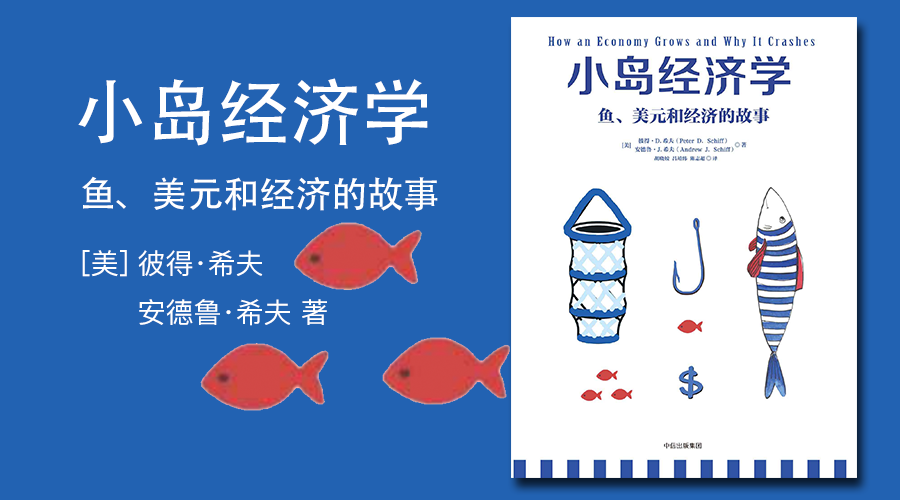
<style>
.page{position:relative;width:900px;height:500px;background:#2262b2}
.page>*{position:absolute;margin:0}
.t1{font:72px "AdobeHeitiStd-Regular";color:#ffffff}
.t2{font:36px "AdobeHeitiStd-Regular";color:#ffffff}
.t3{font:28px "PingFangSC-Regular";color:#ffffff}
</style>
<div class="page">
<p class="t1" style="left:78px;top:78px;width:350px;height:68px">小岛经济学</p>
<p class="t2" style="left:82px;top:176px;width:356px;height:35px">鱼、美元和经济的故事</p>
<p class="t3" style="left:82px;top:250px;width:245px;height:76px">[美] 彼得·希夫<br>      安德鲁·希夫 著</p>
</div>
